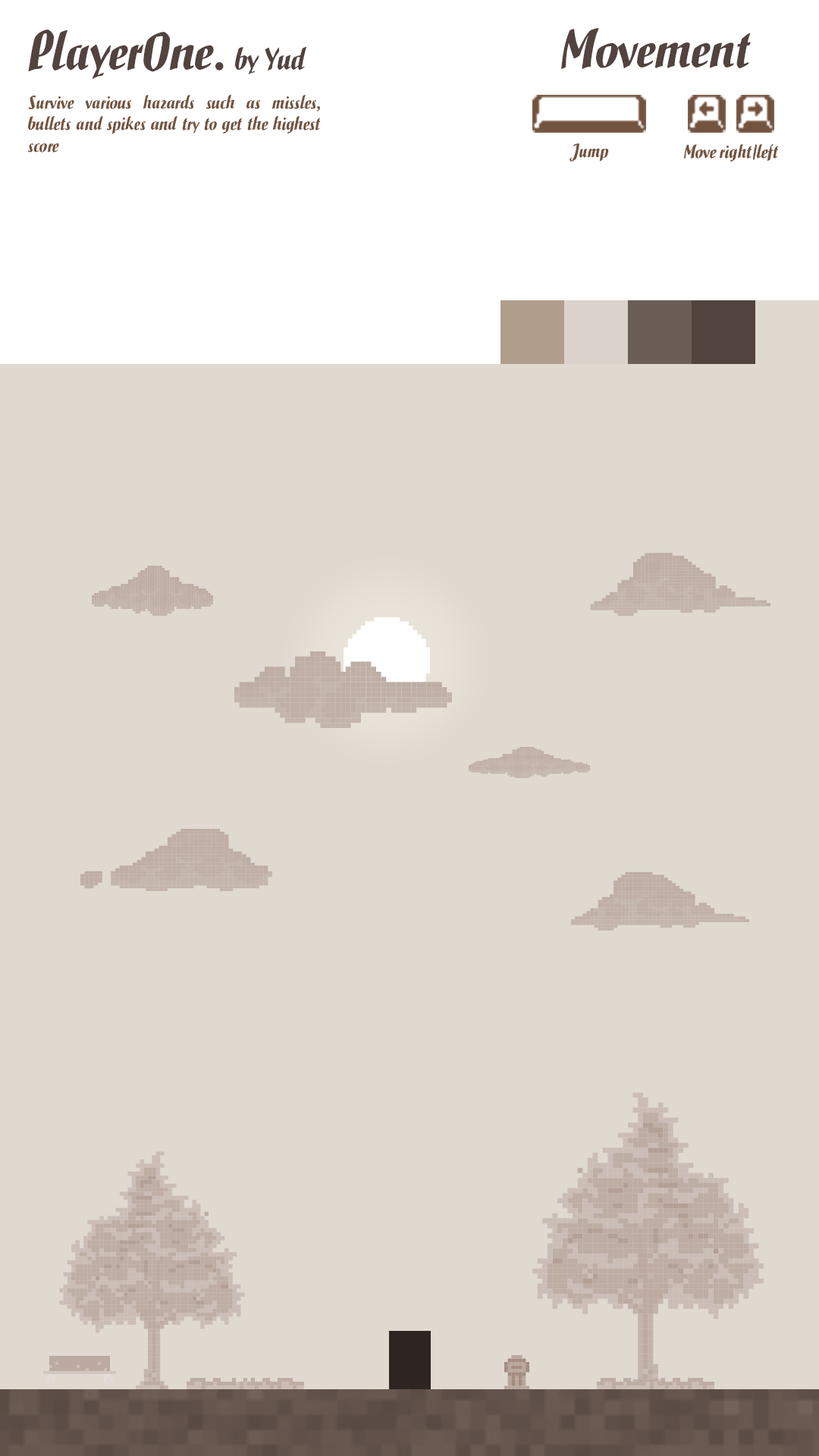
<style>
.page{position:relative;width:819px;height:1456px;background:#dfd9d0}
.page>*{position:absolute;margin:0}
.t1{font:52.3px "iCielBCRostrum-Regular";color:#52433e}
.t2{font:29.6px "iCielBCRostrum-Regular";color:#52433e}
.t3{font:18.2px "iCielBCRostrum-Regular";color:#735340}
</style>
<div class="page">
<p class="t1" style="left:28px;top:30px;width:279px;height:49px">PlayerOne. <span class="t2">by Yud</span></p>
<p class="t1" style="left:561px;top:28px;width:190px;height:41px">Movement</p>
<p class="t3" style="left:28px;top:95px;width:293px;height:57px;text-align:justify">Survive various hazards such as missles, bullets and spikes and try to get the highest score</p>
<p class="t3" style="left:570px;top:143px;width:39px;height:19px">Jump</p>
<p class="t3" style="left:684px;top:144px;width:94px;height:18px">Move right/left</p>
</div>
